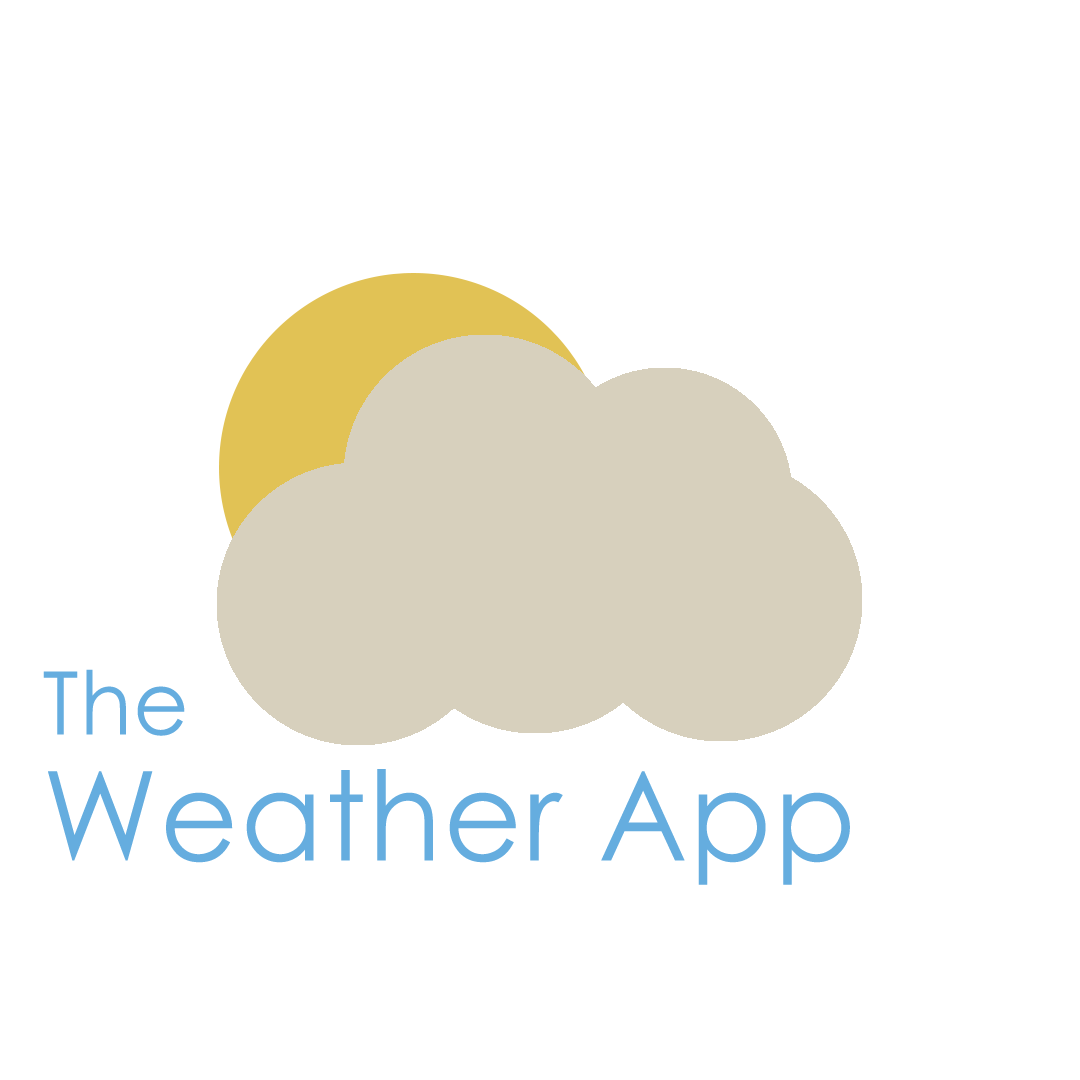
<style>
.page{position:relative;width:1080px;height:1080px;background:#ffffff}
.page>*{position:absolute;margin:0}
.t1{font:124px/6.6px "CenturyGothic";letter-spacing:0.02em;color:#65addf;scale:0.97 1}
.t2{font:87.5px/6.6px "CenturyGothic";letter-spacing:0.02em;color:#65addf;scale:0.97 1}
.t3{font:103.2px/6.6px "CenturyGothic";letter-spacing:0.02em;color:#65addf;scale:0.97 1}
.t4{font:143.1px/6.6px "CenturyGothic";letter-spacing:0.02em;color:#65addf;scale:0.97 1}
</style>
<div class="page">
<p class="t1" style="left:43px;top:669px;width:807px;height:216px"><span class="t2">The<br></span><span class="t3"><br><br><br><br><br><br><br><br><br><br><br><br></span><span class="t4"><br><br><br><br><br><br></span>Weather App</p>
</div>
